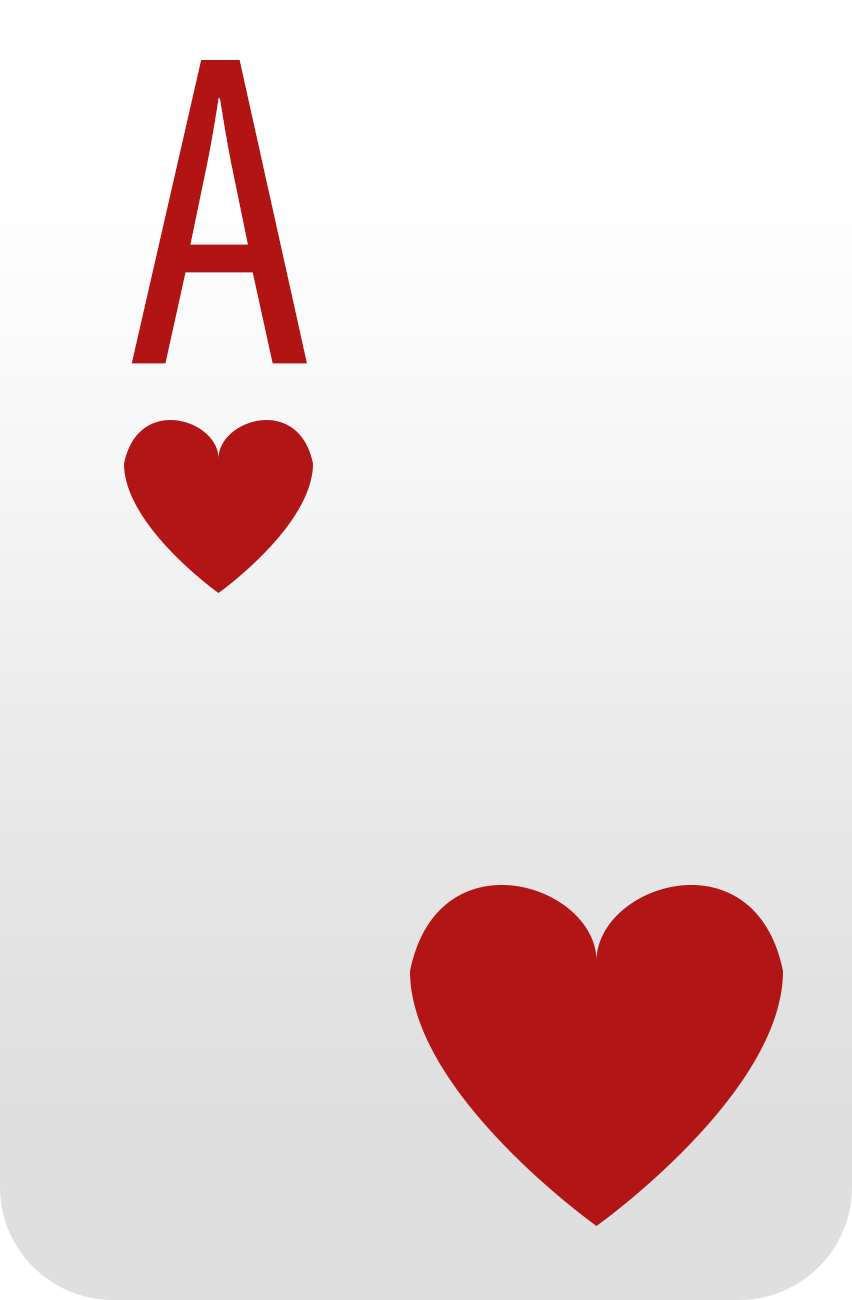
<style>
.page{position:relative;width:852px;height:1300px}
.page>*{position:absolute;margin:0}
.t1{font:450px "MyriadConceptRoman-Condensed";color:#b21414}
</style>
<div class="page">
<p class="t1" style="left:131px;top:60px;width:176px;height:304px">A</p>
</div>
